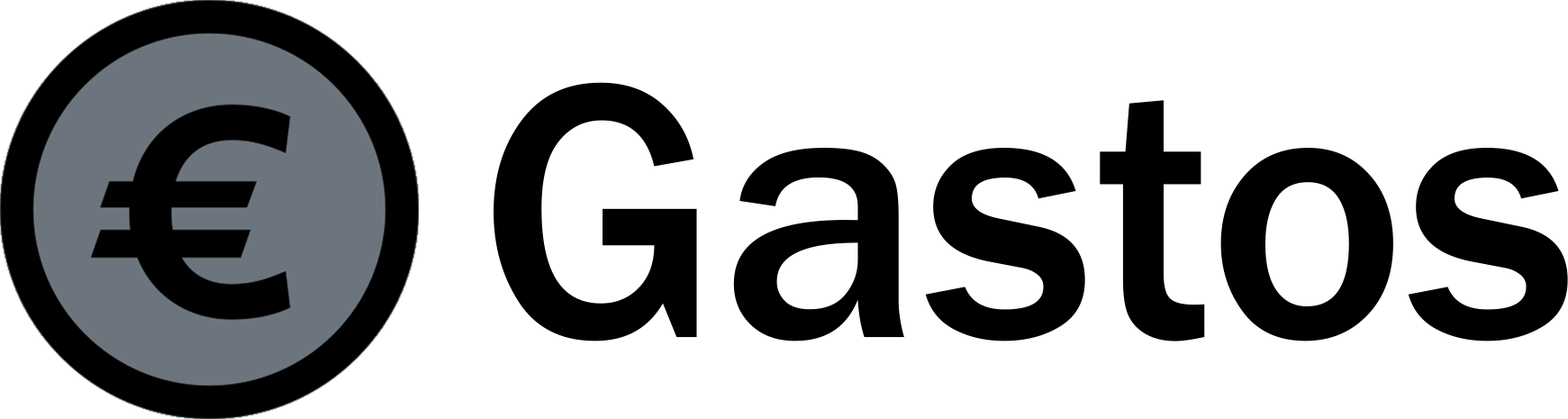
<style>
.page{position:relative;width:1568px;height:419px;background:#ffffff}
.page>*{position:absolute;margin:0}
.t1{font:375.3px "FranklinGothic-Medium";color:#000000}
</style>
<div class="page">
<p class="t1" style="left:494px;top:82px;width:1074px;height:259px">Gastos</p>
</div>
